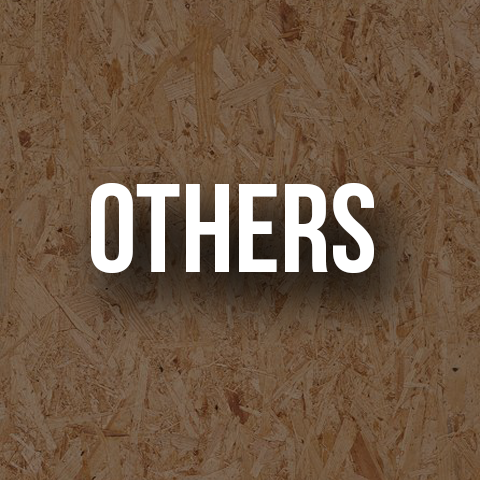
<style>
.page{position:relative;width:480px;height:480px}
.page>*{position:absolute;margin:0}
.t1{font:125px "BebasNeue";color:#ffffff}
</style>
<div class="page">
<p class="t1" style="left:91px;top:183px;width:283px;height:90px">others</p>
</div>
